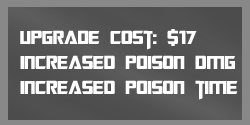
<style>
.page{position:relative;width:250px;height:125px}
.page>*{position:absolute;margin:0}
.t1{font:21px "TransformersMovie";color:#ffffff}
.t2{font:21px "TransformersMovie";letter-spacing:0.02em;color:#ffffff}
</style>
<div class="page">
<p class="t1" style="left:20px;top:29px;width:218px;height:71px">upgrade cost: $17<br>Increased poison <span class="t2">d</span>mg<br>Increased poison time</p>
</div>
